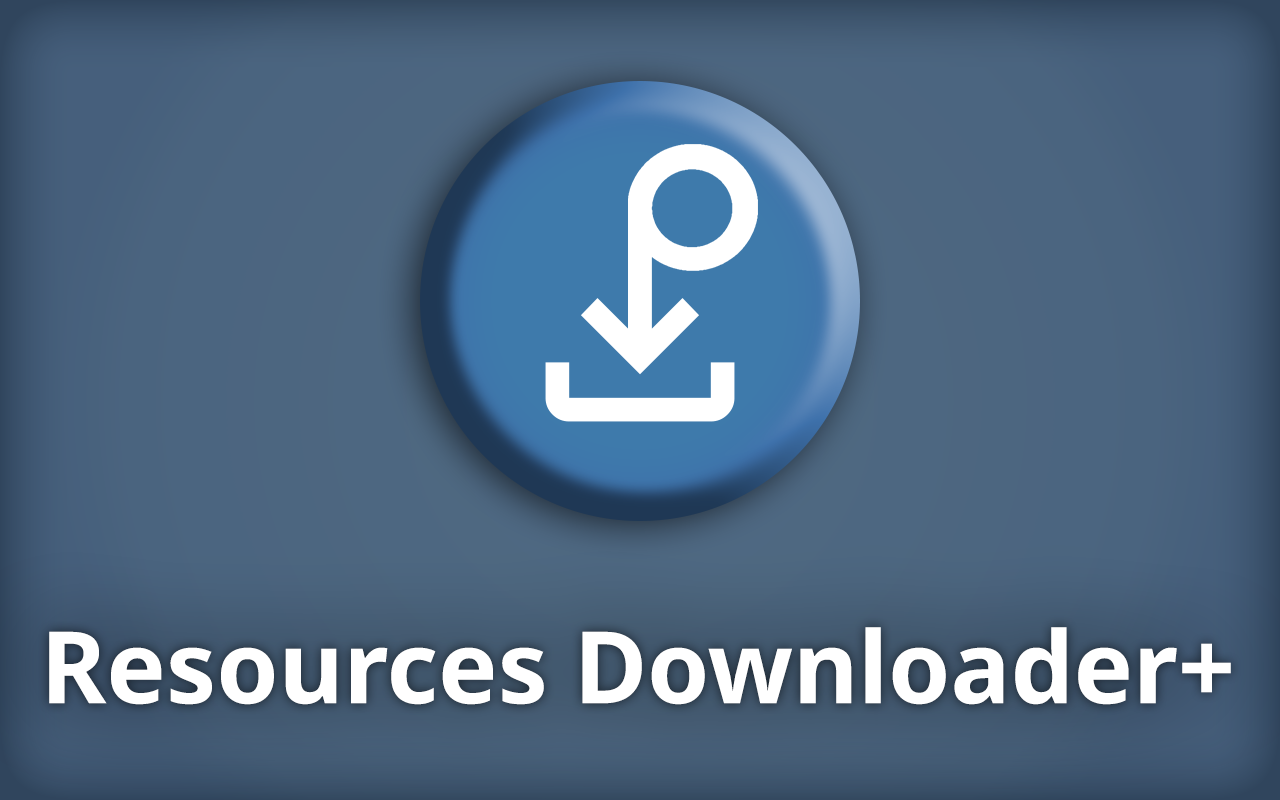
<style>
.page{position:relative;width:1280px;height:800px}
.page>*{position:absolute;margin:0}
.t1{font:100px "NotoSans-Bold";color:#ffffff}
</style>
<div class="page">
<p class="t1" style="left:49px;top:627px;width:1182px;height:78px">Resources Downloader+</p>
</div>
